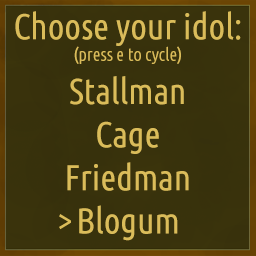
<style>
.page{position:relative;width:256px;height:256px}
.page>*{position:absolute;margin:0}
.t1{font:36px "UbuntuCondensed-Regular";color:#dabc5a}
.t2{font:18px "UbuntuCondensed-Regular";color:#dabc5a}
</style>
<div class="page">
<p class="t1" style="left:15px;top:11px;width:226px;height:230px;text-align:center">Choose your idol:<br><span class="t2">(press e to cycle)<br></span>Stallman<br>Cage<br>Friedman<br>Blogum</p>
</div>
